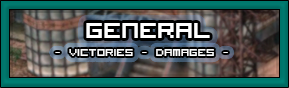
<style>
.page{position:relative;width:289px;height:88px}
.page>*{position:absolute;margin:0}
.t1{font:30px "VisitorTT1BRK";color:#ffffff}
.t2{font:14px "VisitorTT1BRK";color:#ffffff}
</style>
<div class="page">
<p class="t1" style="left:86px;top:23px;width:124px;height:15px">General</p>
<p class="t2" style="left:55px;top:49px;width:173px;height:7px">- victories - damages -</p>
</div>
